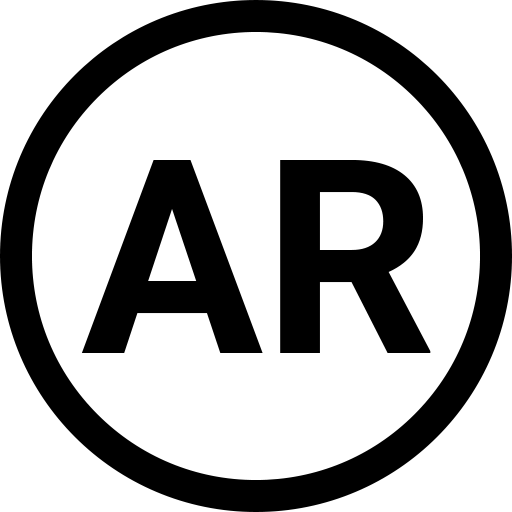
<style>
.page{position:relative;width:512px;height:512px;background:#ffffff}
.page>*{position:absolute;margin:0}
.t1{font:270.8px "Roboto-Bold";color:#000000}
</style>
<div class="page">
<p class="t1" style="left:81px;top:160px;width:350px;height:193px">AR</p>
</div>
